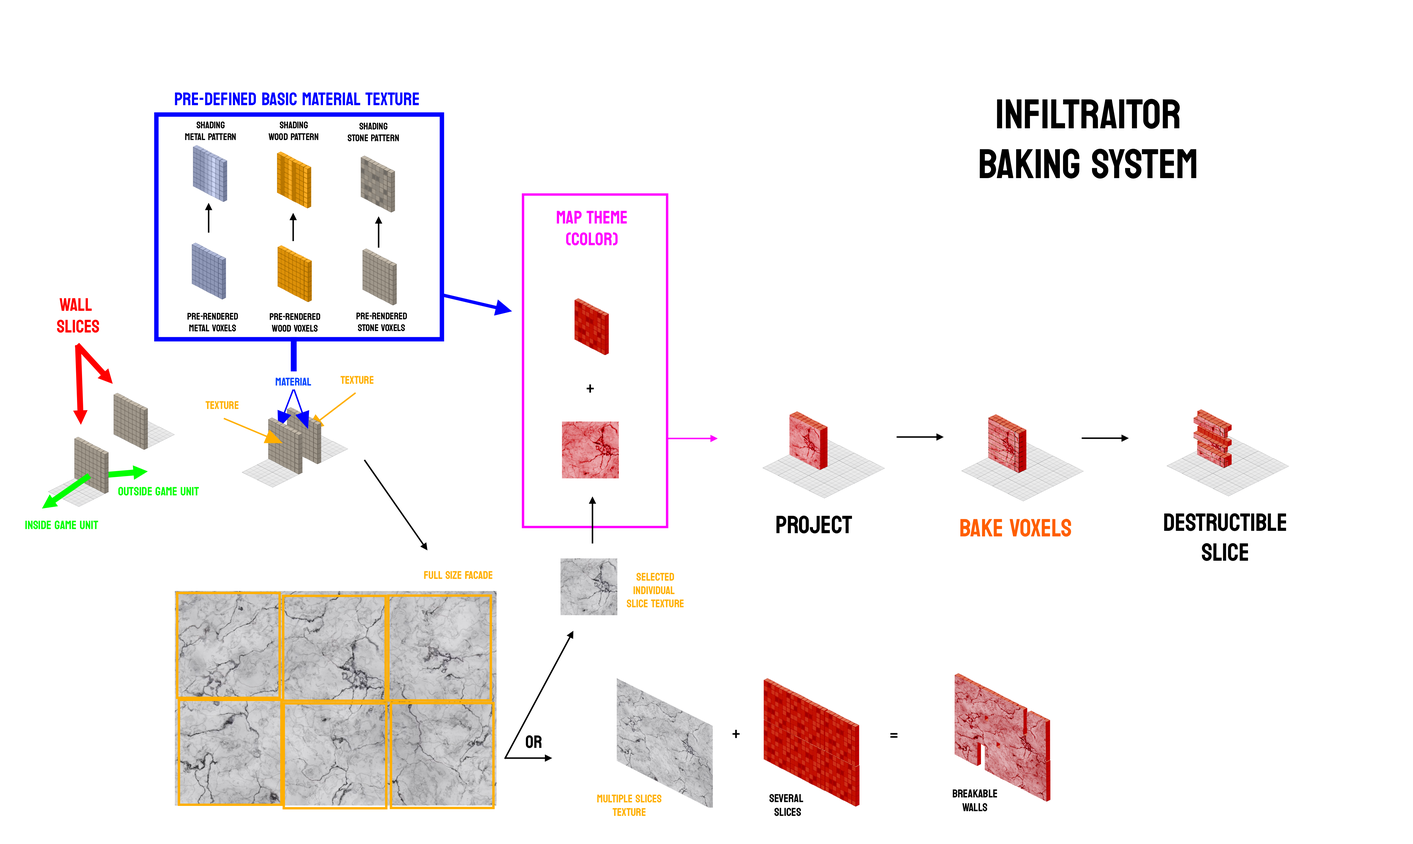
<style>
.page{position:relative;width:1413px;height:844px;background:#ffffff}
.page>*{position:absolute;margin:0}
.t1{font:18.2px "Bayon-Regular";color:#0000ff}
.t2{font:41.6px "Bayon-Regular";color:#000000}
.t3{font:9.7px "Bayon-Regular";color:#000000}
.t4{font:18.2px "Bayon-Regular";color:#ff00ff}
.t5{font:18.2px "Bayon-Regular";color:#ff0000}
.t6{font:11.1px "Bayon-Regular";color:#0043ff}
.t7{font:11.1px "Bayon-Regular";color:#ffaf00}
.t8{font:17.9px "Bayon-Regular";color:#000000}
.t9{font:12px "Bayon-Regular";color:#00ff00}
.t10{font:24.9px "Bayon-Regular";color:#000000}
.t11{font:24.9px "Bayon-Regular";color:#ff5e00}
.t12{font:11.4px "Bayon-Regular";color:#000000}
</style>
<div class="page">
<p class="t1" style="left:175px;top:92px;width:244px;height:13px">PRE-DEFINED BASIC MATERIAL TEXTURE</p>
<p class="t2" style="left:980px;top:99px;width:216px;height:80px;text-align:center">INFILTRAITOR<br>BAKING SYSTEM</p>
<p class="t3" style="left:185px;top:121px;width:51px;height:19px;text-align:center">SHADING<br>METAL PATTERN</p>
<p class="t3" style="left:269px;top:121px;width:49px;height:19px;text-align:center">SHADING<br>WOOD PATTERN</p>
<p class="t3" style="left:348px;top:122px;width:51px;height:19px;text-align:center">SHADING<br>STONE PATTERN</p>
<p class="t4" style="left:557px;top:211px;width:70px;height:34px;text-align:center">MAP THEME<br>(COLOR)</p>
<p class="t5" style="left:57px;top:298px;width:42px;height:35px;text-align:center">WALL <br>SLICES</p>
<p class="t3" style="left:187px;top:313px;width:51px;height:19px;text-align:center">PRE-RENDERED<br>METAL VOXELS</p>
<p class="t3" style="left:270px;top:313px;width:50px;height:19px;text-align:center">PRE-RENDERED<br>WOOD VOXELS</p>
<p class="t3" style="left:356px;top:312px;width:51px;height:19px;text-align:center">PRE-RENDERED<br>STONE VOXELS</p>
<p class="t6" style="left:276px;top:378px;width:35px;height:7px">MATERIAL</p>
<p class="t7" style="left:341px;top:376px;width:33px;height:8px">TEXTURE</p>
<p class="t8" style="left:587px;top:384px;width:7px;height:9px">+</p>
<p class="t7" style="left:206px;top:401px;width:33px;height:8px">TEXTURE</p>
<p class="t9" style="left:118px;top:487px;width:81px;height:9px">OUTSIDE GAME UNIT</p>
<p class="t9" style="left:25px;top:520px;width:73px;height:9px">INSIDE GAME UNIT</p>
<p class="t10" style="left:776px;top:515px;width:76px;height:18px">PROJECT</p>
<p class="t11" style="left:960px;top:518px;width:111px;height:19px">BAKE VOXELS</p>
<p class="t10" style="left:1164px;top:513px;width:122px;height:48px;text-align:center">DESTRUCTIBLE<br>SLICE</p>
<p class="t7" style="left:424px;top:571px;width:69px;height:8px">FULL SIZE FACADE</p>
<p class="t7" style="left:627px;top:573px;width:57px;height:34px;text-align:center">SELECTED<br>INDIVIDUAL <br>SLICE TEXTURE</p>
<p class="t8" style="left:526px;top:735px;width:16px;height:13px">OR</p>
<p class="t8" style="left:733px;top:730px;width:7px;height:8px">+</p>
<p class="t8" style="left:890px;top:733px;width:8px;height:5px">=</p>
<p class="t7" style="left:597px;top:794px;width:65px;height:22px;text-align:center">MULTIPLE SLICES<br>TEXTURE</p>
<p class="t12" style="left:769px;top:794px;width:34px;height:22px;text-align:center">SEVERAL <br>SLICES</p>
<p class="t12" style="left:953px;top:789px;width:44px;height:22px;text-align:center">BREAKABLE<br>WALLS</p>
</div>
